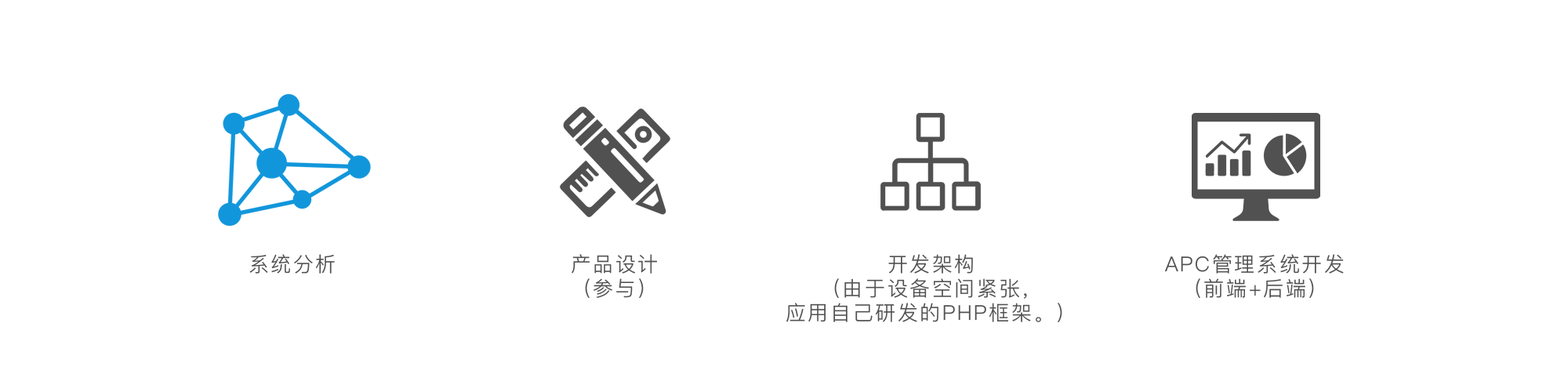
<style>
.page{position:relative;width:1568px;height:392px;background:#ffffff}
.page>*{position:absolute;margin:0}
.t1{font:20.4px "PingFangSC-Light";letter-spacing:0.1em;color:#515151}
.t2{font:20.4px/31.4px "PingFangSC-Light";letter-spacing:0.1em;color:#515151}
</style>
<div class="page">
<p class="t1" style="left:249px;top:254px;width:86px;height:20px">系统分析</p>
<p class="t2" style="left:572px;top:254px;width:85px;height:44px;text-align:center">产品设计<br>（参与）</p>
<p class="t2" style="left:786px;top:254px;width:276px;height:68px;text-align:center">开发架构<br>（由于设备空间紧张，<br>应用自己研发的PHP框架。）</p>
<p class="t2" style="left:1165px;top:254px;width:179px;height:44px;text-align:center">APC管理系统开发<br>（前端+后端）</p>
</div>
